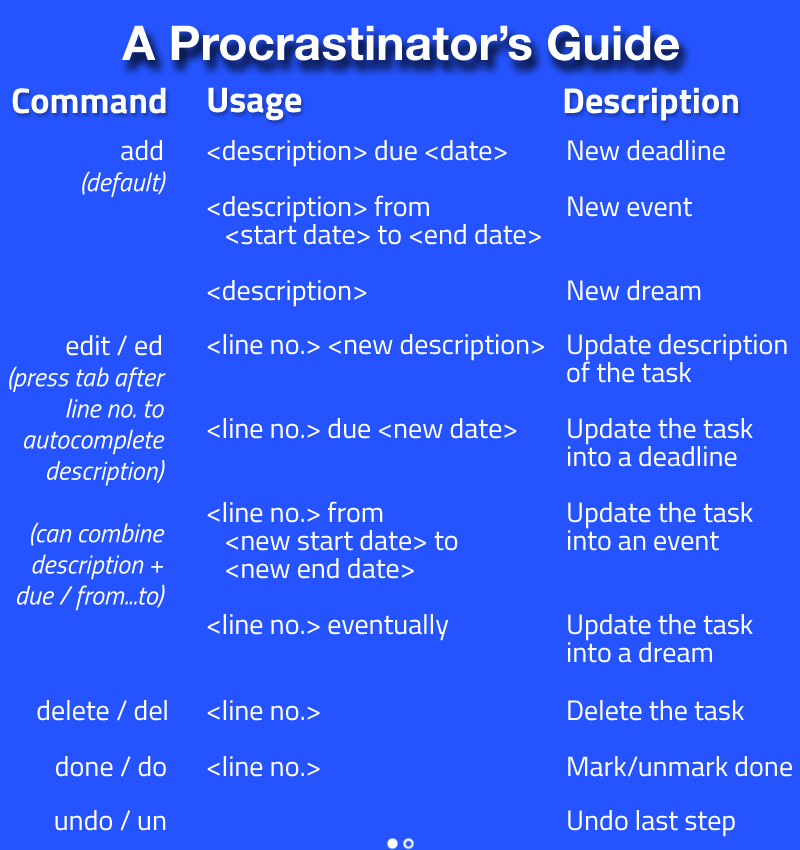
<style>
.page{position:relative;width:800px;height:850px;background:#2554ff}
.page>*{position:absolute;margin:0}
.t1{font:48px "HelveticaNeue-Bold";color:#ffffff}
.t2{font:36px "Titillium-Bold";color:#ffffff}
.t3{font:26px "Titillium-RegularItalic";color:#ffffff}
.t4{font:28px "Titillium-Regular";color:#ffffff}
.t5{font:28px/28px "Titillium-Regular";color:#ffffff}
</style>
<div class="page">
<p class="t1" style="left:122px;top:25px;width:557px;height:36px">A Procrastinator’s Guide</p>
<p class="t2" style="left:12px;top:87px;width:154px;height:27px">Command</p>
<p class="t2" style="left:208px;top:87px;width:94px;height:34px">Usage</p>
<p class="t2" style="left:564px;top:87px;width:174px;height:34px">Description</p>
<p class="t3" style="left:82px;top:140px;width:84px;height:57px;text-align:right"><span class="t4">add<br></span>(default)</p>
<p class="t5" style="left:207px;top:140px;width:518px;height:167px">&lt;description&gt; due &lt;date&gt; New deadline<br><br>&lt;description&gt; from  New event<br>   &lt;start date&gt; to &lt;end date&gt;<br><br>&lt;description&gt;   New dream</p>
<p class="t3" style="left:9px;top:335px;width:157px;height:276px;text-align:right"><span class="t4">edit / ed<br></span>(press tab after<br>line no. to<br>autocomplete<br>description)<br><br>(can combine<br>description +<br>due / from...to)</p>
<p class="t5" style="left:207px;top:334px;width:580px;height:329px">&lt;line no.&gt; &lt;new description&gt; Update description<br>     of the task<br><br>&lt;line no.&gt; due &lt;new date&gt; Update the task<br>     into a deadline<br><br>&lt;line no.&gt; from   Update the task<br>   &lt;new start date&gt; to  into an event<br>   &lt;new end date&gt;<br><br>&lt;line no.&gt; eventually  Update the task<br>     into a dream</p>
<p class="t4" style="left:37px;top:700px;width:130px;height:21px">delete / del</p>
<p class="t4" style="left:207px;top:700px;width:537px;height:21px">&lt;line no.&gt;    Delete the task</p>
<p class="t4" style="left:56px;top:756px;width:110px;height:21px">done / do</p>
<p class="t4" style="left:207px;top:756px;width:585px;height:21px">&lt;line no.&gt;    Mark/unmark done</p>
<p class="t4" style="left:55px;top:810px;width:111px;height:21px">undo / un</p>
<p class="t4" style="left:568px;top:810px;width:167px;height:27px">Undo last step</p>
</div>
